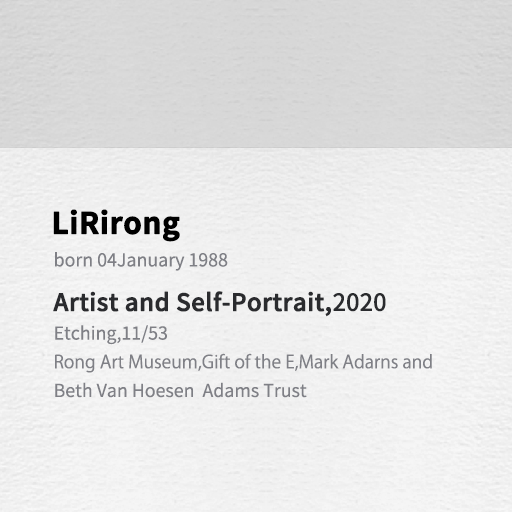
<style>
.page{position:relative;width:512px;height:512px}
.page>*{position:absolute;margin:0}
.t1{font:29.4px "SourceHanSansCN-Bold";color:#000000;font-weight:bold}
.t2{font:17.8px "SourceHanSansCN-Regular";color:#7f8086}
.t3{font:23.7px "SourceHanSansCN-Medium";color:#2a2b2e;font-weight:bold}
.t4{font:23.7px "SourceHanSansCN-Medium";color:#2a2b2e}
.t5{font:17.8px "KozGoPr6N-Regular";color:#7f8086}
</style>
<div class="page">
<p class="t1" style="left:53px;top:209px;width:127px;height:33px">LiRirong</p>
<p class="t2" style="left:55px;top:252px;width:173px;height:19px">born 04January 1988</p>
<p class="t3" style="left:53px;top:291px;width:333px;height:26px">Artist and Self-Portrait,<span class="t4">2020</span></p>
<p class="t2" style="left:55px;top:325px;width:112px;height:20px">Etching,11/53</p>
<p class="t5" style="left:55px;top:353px;width:377px;height:20px">Rong Art Museum,Gift of the E,Mark Adarns and</p>
<p class="t2" style="left:55px;top:382px;width:252px;height:16px">Beth Van Hoesen  Adams Trust</p>
</div>
